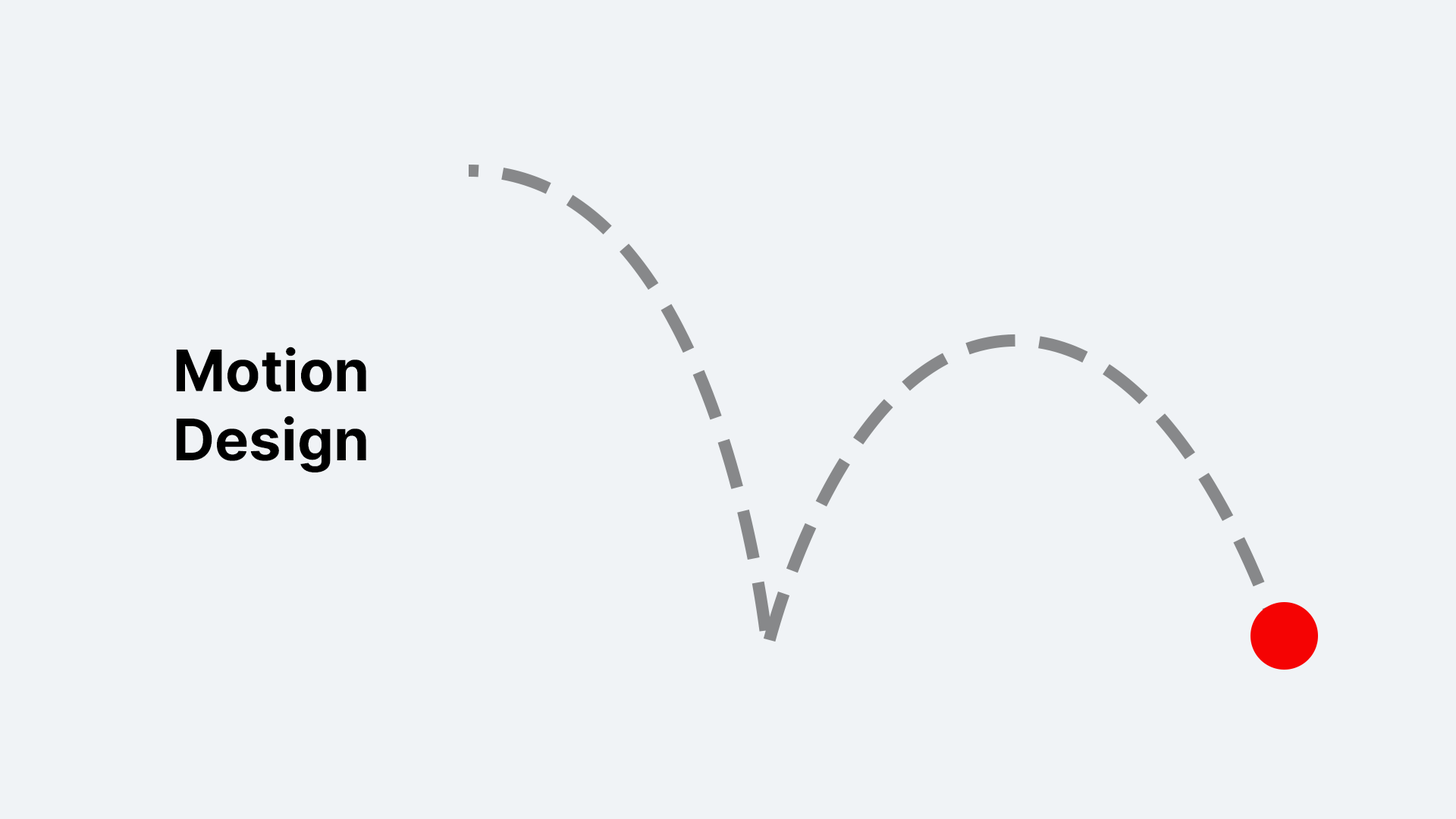
<style>
.page{position:relative;width:1456px;height:819px;background:#f0f3f6}
.page>*{position:absolute;margin:0}
.t1{font:57.5px "Inter-Bold";color:#000000}
</style>
<div class="page">
<p class="t1" style="left:176px;top:347px;width:190px;height:125px">Motion<br>Design</p>
</div>
